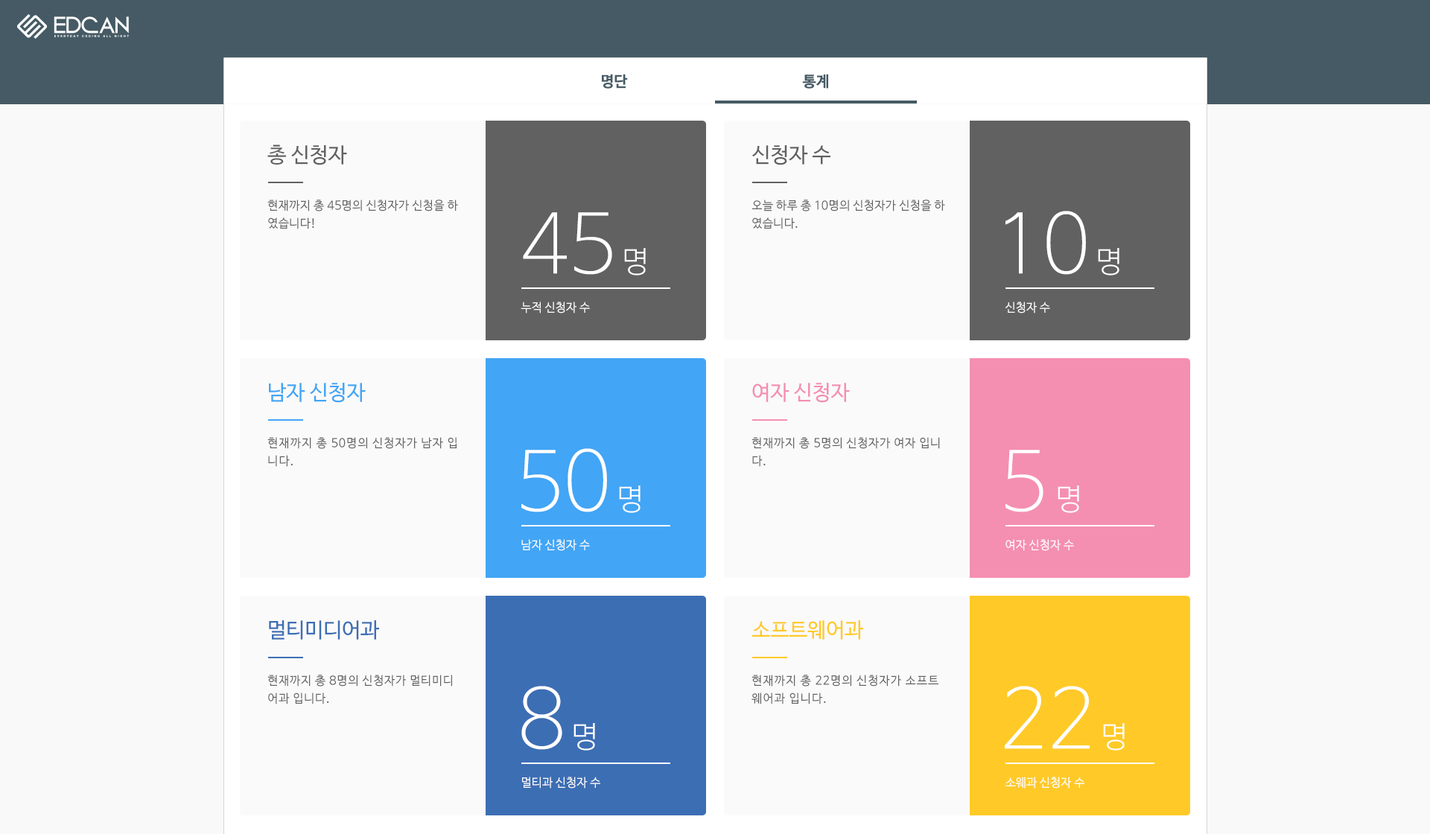
<style>
.page{position:relative;width:1430px;height:834px;background:#f9f9f9}
.page>*{position:absolute;margin:0}
.t1{font:14.9px "NanumBarunGothicBold";color:#455a64}
.t2{font:20.9px "NanumBarunGothic";color:#616161}
.t3{font:11.9px/17.9px "NanumBarunGothic";letter-spacing:0.015em;color:#616161}
.t4{font:81.9px "NanumBarunGothicUltraLight";color:#ffffff}
.t5{font:29.8px "NanumBarunGothicLight";color:#ffffff}
.t6{font:11.9px "NanumBarunGothic";color:#ffffff}
.t7{font:20.9px "NanumBarunGothic";color:#42a5f5}
.t8{font:20.9px "NanumBarunGothic";color:#f48fb1}
.t9{font:11.9px/17.9px "NanumBarunGothic";letter-spacing:0.06em;color:#616161}
.t10{font:11.9px/17.9px "NanumBarunGothic";letter-spacing:0.04em;color:#616161}
.t11{font:20.9px "NanumBarunGothic";color:#3c6eb4}
.t12{font:20.9px "NanumBarunGothic";color:#ffca28}
</style>
<div class="page">
<p class="t1" style="left:602px;top:74px;width:26px;height:15px">명단</p>
<p class="t1" style="left:802px;top:74px;width:26px;height:15px">통계</p>
<p class="t2" style="left:267px;top:144px;width:80px;height:21px">총 신청자</p>
<p class="t2" style="left:752px;top:145px;width:78px;height:20px">신청자 수</p>
<p class="t3" style="left:267px;top:200px;width:191px;height:29px">현재까지 총 45명의 신청자가 신청을 하<br>였습니다!</p>
<p class="t3" style="left:751px;top:200px;width:194px;height:29px">오늘 하루 총 10명의 신청자가 신청을 하<br>였습니다.</p>
<p class="t4" style="left:523px;top:212px;width:89px;height:63px">45</p>
<p class="t4" style="left:1005px;top:211px;width:81px;height:64px">10</p>
<p class="t5" style="left:624px;top:248px;width:22px;height:28px">명</p>
<p class="t5" style="left:1098px;top:248px;width:21px;height:28px">명</p>
<p class="t6" style="left:521px;top:302px;width:69px;height:12px">누적 신청자 수</p>
<p class="t6" style="left:1005px;top:302px;width:45px;height:12px">신청자 수</p>
<p class="t7" style="left:269px;top:383px;width:97px;height:20px">남자 신청자</p>
<p class="t8" style="left:752px;top:383px;width:98px;height:20px">여자 신청자</p>
<p class="t9" style="left:267px;top:437px;width:189px;height:30px">현재까지 총 50명의 신청자가 남자 입<br>니다.</p>
<p class="t10" style="left:751px;top:437px;width:189px;height:30px">현재까지 총 5명의 신청자가 여자 입니<br>다.</p>
<p class="t4" style="left:521px;top:448px;width:86px;height:64px">50</p>
<p class="t4" style="left:1005px;top:450px;width:38px;height:62px">5</p>
<p class="t5" style="left:619px;top:486px;width:21px;height:27px">명</p>
<p class="t5" style="left:1057px;top:486px;width:22px;height:27px">명</p>
<p class="t6" style="left:521px;top:539px;width:69px;height:12px">남자 신청자 수</p>
<p class="t6" style="left:1005px;top:539px;width:69px;height:12px">여자 신청자 수</p>
<p class="t11" style="left:269px;top:620px;width:110px;height:20px">멀티미디어과</p>
<p class="t12" style="left:751px;top:620px;width:112px;height:20px">소프트웨어과</p>
<p class="t10" style="left:267px;top:675px;width:185px;height:29px">현재까지 총 8명의 신청자가 멀티미디<br>어과 입니다.</p>
<p class="t9" style="left:751px;top:675px;width:187px;height:29px">현재까지 총 22명의 신청자가 소프트<br>웨어과 입니다.</p>
<p class="t4" style="left:521px;top:686px;width:41px;height:64px">8</p>
<p class="t4" style="left:1005px;top:686px;width:84px;height:63px">22</p>
<p class="t5" style="left:573px;top:723px;width:22px;height:28px">명</p>
<p class="t5" style="left:1103px;top:723px;width:21px;height:28px">명</p>
<p class="t6" style="left:522px;top:777px;width:78px;height:12px">멀티과 신청자 수</p>
<p class="t6" style="left:1005px;top:777px;width:79px;height:12px">소웨과 신청자 수</p>
</div>
